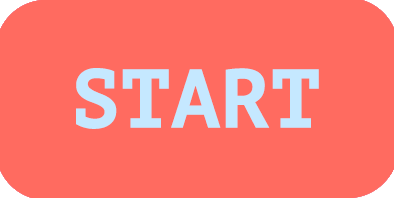
<style>
.page{position:relative;width:394px;height:198px;background:#ff6b60}
.page>*{position:absolute;margin:0}
.t1{font:83.3px "PTMono-Bold";color:#c5e8ff}
</style>
<div class="page">
<p class="t1" style="left:76px;top:68px;width:243px;height:61px">START</p>
</div>
